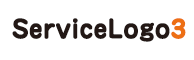
<style>
.page{position:relative;width:194px;height:60px;background:#ffffff}
.page>*{position:absolute;margin:0}
.t1{font:24px "Jun501Pro-Bold";color:#231815;font-weight:bold}
.t2{font:24px "Jun501Pro-Bold";color:#ed6f14;font-weight:bold}
</style>
<div class="page">
<p class="t1" style="left:12px;top:18px;width:174px;height:24px">ServiceLogo<span class="t2">3</span></p>
</div>
